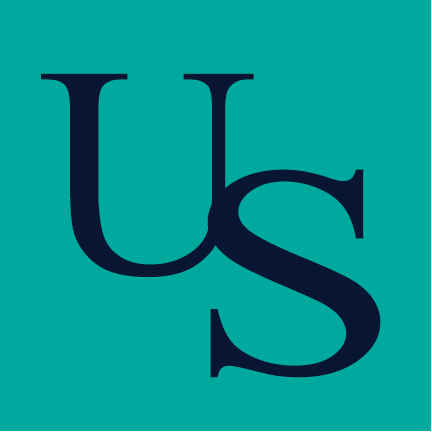
<style>
.page{position:relative;width:432px;height:432px;background:#00a99d}
.page>*{position:absolute;margin:0}
.t1{font:300px "IskoolaPota";letter-spacing:0.04em;color:#091633;text-transform:uppercase}
.t2{font:300px "IskoolaPota";letter-spacing:0.04em;color:#091633;text-transform:uppercase;scale:1.3 1}
</style>
<div class="page">
<p class="t1" style="left:41px;top:73px;width:213px;height:204px">U</p>
<p class="t2" style="left:207px;top:169px;width:174px;height:209px">S</p>
</div>
